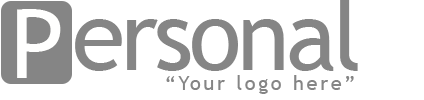
<style>
.page{position:relative;width:424px;height:100px;background:#ffffff}
.page>*{position:absolute;margin:0}
.t1{font:96px "TrebuchetMS";letter-spacing:-0.04em;color:#858585}
.t2{font:96px "TrebuchetMS";color:#fffffe}
.t3{font:19.6px "TrebuchetMS";letter-spacing:0.14em;color:#858585}
</style>
<div class="page">
<p class="t1" style="left:75px;top:0px;width:283px;height:71px">ersonal</p>
<p class="t2" style="left:17px;top:9px;width:44px;height:69px">P</p>
<p class="t3" style="left:166px;top:75px;width:188px;height:19px">“Your logo here”</p>
</div>
